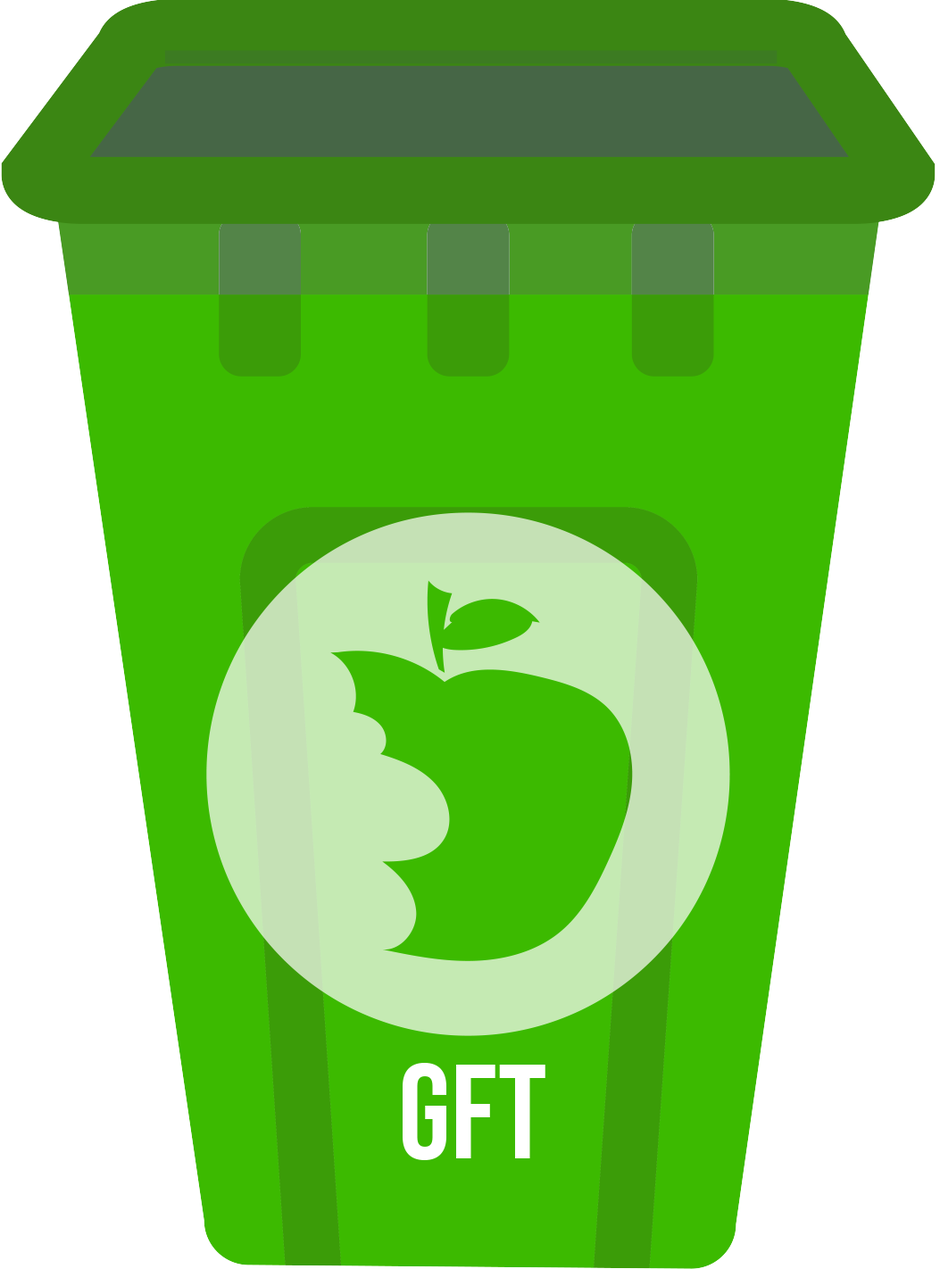
<style>
.page{position:relative;width:940px;height:1269px;background:#3cba00}
.page>*{position:absolute;margin:0}
.t1{font:133.9px "BebasNeue-Regular";color:#ffffff}
</style>
<div class="page">
<p class="t1" style="left:402px;top:1063px;width:143px;height:97px">GFT</p>
</div>
